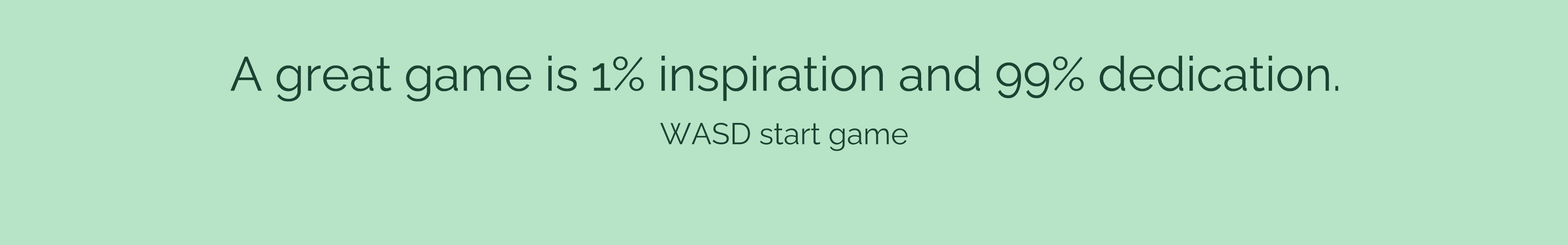
<style>
.page{position:relative;width:1568px;height:245px;background:#b7e4c7}
.page>*{position:absolute;margin:0}
.t1{font:48.1px "RalewayRoman-Regular";color:#1b4332}
.t2{font:30.1px "RalewayRoman-Regular";color:#1b4332}
</style>
<div class="page">
<p class="t1" style="left:230px;top:56px;width:1109px;height:46px">A great game is 1% inspiration and 99% dedication.</p>
<p class="t2" style="left:660px;top:122px;width:248px;height:29px">WASD start game</p>
</div>
